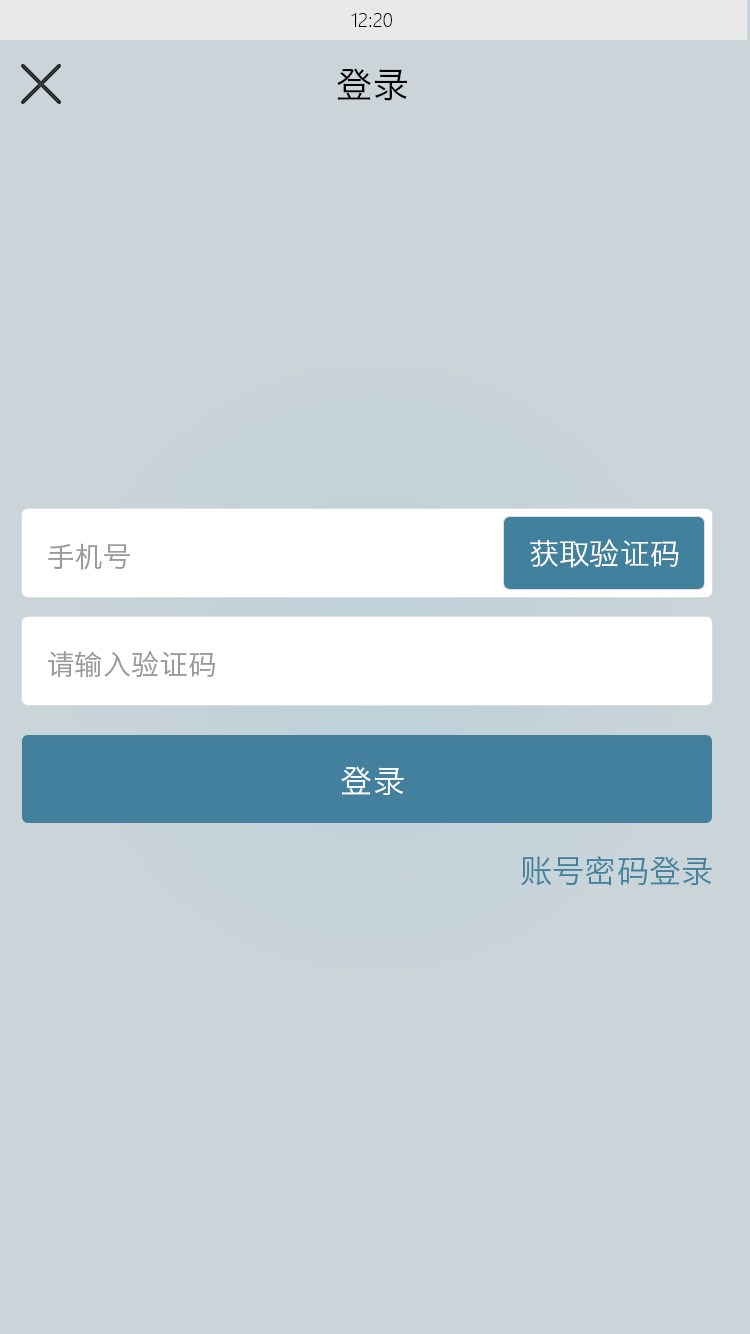
<style>
.page{position:relative;width:750px;height:1334px;background:#cbd5d9}
.page>*{position:absolute;margin:0}
.t1{font:18px "MicrosoftYaHeiLight";color:#000000}
.t2{font:36px "HiraginoSansGB-W3";color:#000000}
.t3{font:28px "HiraginoSansGB-W3";color:#9a9a9a}
.t4{font:30px "HiraginoSansGB-W3";color:#ffffff}
.t5{font:32px "HiraginoSansGB-W3";color:#ffffff}
.t6{font:32px "HiraginoSansGB-W3";color:#42819d}
</style>
<div class="page">
<p class="t1" style="left:351px;top:13px;width:41px;height:14px">12:20</p>
<p class="t2" style="left:337px;top:68px;width:71px;height:33px">登录</p>
<p class="t3" style="left:48px;top:543px;width:82px;height:27px">手机号</p>
<p class="t4" style="left:530px;top:539px;width:149px;height:29px">获取验证码</p>
<p class="t3" style="left:48px;top:650px;width:167px;height:28px">请输入验证码</p>
<p class="t5" style="left:341px;top:766px;width:63px;height:29px">登录</p>
<p class="t6" style="left:521px;top:856px;width:191px;height:30px">账号密码登录</p>
</div>
